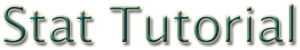
<style>
.page{position:relative;width:300px;height:50px;background:#ffffff}
.page>*{position:absolute;margin:0}
.t1{font:50px "LucidaSans"}
</style>
<div class="page">
<p class="t1" style="left:3px;top:3px;width:291px;height:40px">Stat Tutorial</p>
</div>
